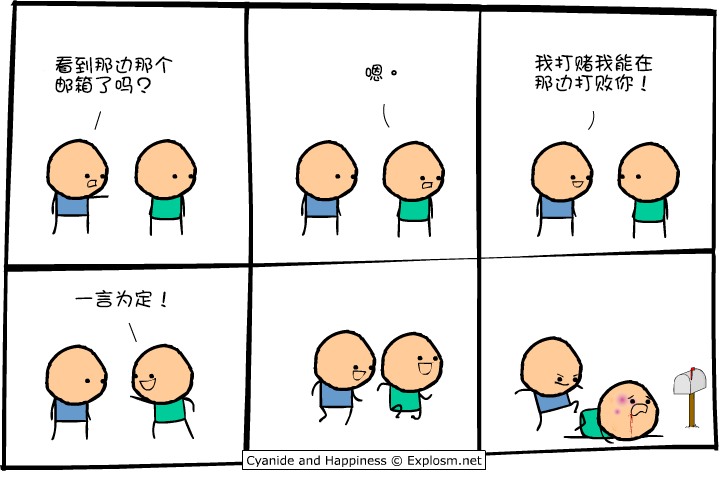
<style>
.page{position:relative;width:720px;height:480px;background:#ffffff}
.page>*{position:absolute;margin:0}
.t1{font:20px/20px "DFGirl";color:#000000}
.t2{font:20px "DFGirl";color:#000000}
</style>
<div class="page">
<p class="t1" style="left:534px;top:53px;width:119px;height:39px">我打赌我能在<br>那边打败你！</p>
<p class="t1" style="left:55px;top:56px;width:118px;height:38px">看到那边那个<br>邮箱了吗？</p>
<p class="t2" style="left:365px;top:64px;width:32px;height:18px">嗯。</p>
<p class="t2" style="left:75px;top:289px;width:91px;height:19px">一言为定！</p>
</div>
